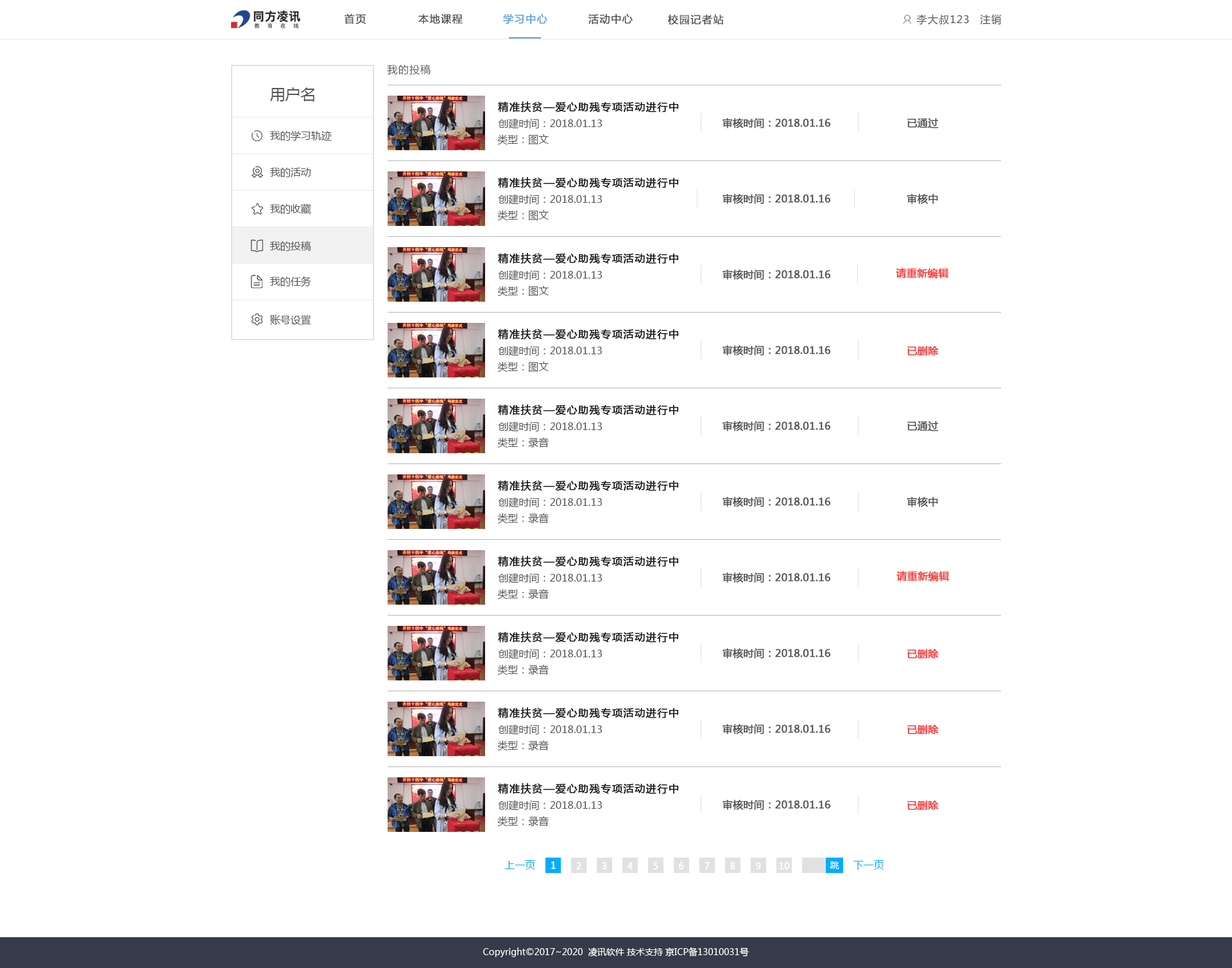
<style>
.page{position:relative;width:1232px;height:968px;background:#ffffff}
.page>*{position:absolute;margin:0}
.t1{font:10.3px "MicrosoftYaHei";letter-spacing:0.075em;color:#555555;font-weight:bold}
.t2{font:10.3px "MicrosoftYaHei";letter-spacing:0.075em;color:#54a0e6;font-weight:bold}
.t3{font:10.3px "MicrosoftYaHei";letter-spacing:0.075em;color:#555555}
.t4{font:15.4px "MicrosoftYaHei";color:#555555;text-transform:uppercase}
.t5{font:10.3px "MicrosoftYaHei";letter-spacing:0.075em;color:#181617;font-weight:bold}
.t6{font:10.3px "MicrosoftYaHei";color:#555555}
.t7{font:10.3px "MicrosoftYaHei";color:#555555;font-weight:bold}
.t8{font:10.3px "MicrosoftYaHei";color:#f73737;font-weight:bold}
.t9{font:10.3px "MicrosoftYaHei";color:#00adff}
.t10{font:9px "MicrosoftYaHei";color:#ffffff;font-weight:bold}
.t11{font:9px "MicrosoftYaHei";color:#ffffff}
</style>
<div class="page">
<p class="t1" style="left:344px;top:13px;width:22px;height:11px">首页</p>
<p class="t1" style="left:418px;top:13px;width:45px;height:11px">本地课程</p>
<p class="t2" style="left:503px;top:13px;width:44px;height:11px">学习中心</p>
<p class="t1" style="left:588px;top:13px;width:45px;height:11px">活动中心</p>
<p class="t1" style="left:668px;top:14px;width:56px;height:11px">校园记者站</p>
<p class="t3" style="left:916px;top:14px;width:53px;height:11px">李大叔123</p>
<p class="t3" style="left:980px;top:14px;width:21px;height:10px">注销</p>
<p class="t3" style="left:387px;top:64px;width:44px;height:11px">我的投稿</p>
<p class="t4" style="left:270px;top:87px;width:44px;height:14px">用户名</p>
<p class="t5" style="left:498px;top:101px;width:181px;height:11px">精准扶贫—爱心助残专项活动进行中</p>
<p class="t6" style="left:498px;top:118px;width:104px;height:11px">创建时间：2018.01.13</p>
<p class="t7" style="left:723px;top:118px;width:108px;height:10px">审核时间：2018.01.16</p>
<p class="t7" style="left:907px;top:118px;width:32px;height:10px">已通过</p>
<p class="t6" style="left:270px;top:130px;width:62px;height:11px">我的学习轨迹</p>
<p class="t6" style="left:497px;top:134px;width:52px;height:11px">类型：图文</p>
<p class="t6" style="left:270px;top:167px;width:41px;height:10px">我的活动</p>
<p class="t5" style="left:498px;top:177px;width:181px;height:11px">精准扶贫—爱心助残专项活动进行中</p>
<p class="t6" style="left:498px;top:194px;width:104px;height:11px">创建时间：2018.01.13</p>
<p class="t7" style="left:723px;top:194px;width:108px;height:10px">审核时间：2018.01.16</p>
<p class="t7" style="left:907px;top:194px;width:31px;height:10px">审核中</p>
<p class="t6" style="left:270px;top:203px;width:41px;height:11px">我的收藏</p>
<p class="t6" style="left:497px;top:210px;width:52px;height:11px">类型：图文</p>
<p class="t6" style="left:270px;top:241px;width:41px;height:10px">我的投稿</p>
<p class="t5" style="left:498px;top:253px;width:181px;height:11px">精准扶贫—爱心助残专项活动进行中</p>
<p class="t6" style="left:498px;top:270px;width:104px;height:10px">创建时间：2018.01.13</p>
<p class="t7" style="left:723px;top:270px;width:108px;height:10px">审核时间：2018.01.16</p>
<p class="t8" style="left:896px;top:268px;width:53px;height:11px">请重新编辑</p>
<p class="t6" style="left:270px;top:276px;width:41px;height:11px">我的任务</p>
<p class="t6" style="left:497px;top:286px;width:52px;height:10px">类型：图文</p>
<p class="t6" style="left:270px;top:314px;width:41px;height:11px">账号设置</p>
<p class="t5" style="left:498px;top:329px;width:181px;height:10px">精准扶贫—爱心助残专项活动进行中</p>
<p class="t6" style="left:498px;top:345px;width:104px;height:11px">创建时间：2018.01.13</p>
<p class="t7" style="left:723px;top:345px;width:108px;height:11px">审核时间：2018.01.16</p>
<p class="t8" style="left:907px;top:346px;width:32px;height:10px">已删除</p>
<p class="t6" style="left:497px;top:361px;width:52px;height:11px">类型：图文</p>
<p class="t5" style="left:498px;top:404px;width:181px;height:11px">精准扶贫—爱心助残专项活动进行中</p>
<p class="t6" style="left:498px;top:421px;width:104px;height:11px">创建时间：2018.01.13</p>
<p class="t7" style="left:723px;top:421px;width:108px;height:10px">审核时间：2018.01.16</p>
<p class="t7" style="left:907px;top:421px;width:32px;height:10px">已通过</p>
<p class="t6" style="left:497px;top:437px;width:52px;height:11px">类型：录音</p>
<p class="t5" style="left:498px;top:480px;width:181px;height:11px">精准扶贫—爱心助残专项活动进行中</p>
<p class="t6" style="left:498px;top:497px;width:104px;height:11px">创建时间：2018.01.13</p>
<p class="t7" style="left:723px;top:497px;width:108px;height:10px">审核时间：2018.01.16</p>
<p class="t7" style="left:907px;top:497px;width:31px;height:10px">审核中</p>
<p class="t6" style="left:497px;top:513px;width:52px;height:11px">类型：录音</p>
<p class="t5" style="left:498px;top:556px;width:181px;height:11px">精准扶贫—爱心助残专项活动进行中</p>
<p class="t6" style="left:498px;top:572px;width:104px;height:11px">创建时间：2018.01.13</p>
<p class="t7" style="left:723px;top:572px;width:108px;height:11px">审核时间：2018.01.16</p>
<p class="t8" style="left:897px;top:571px;width:53px;height:10px">请重新编辑</p>
<p class="t6" style="left:497px;top:588px;width:52px;height:11px">类型：录音</p>
<p class="t5" style="left:498px;top:631px;width:181px;height:11px">精准扶贫—爱心助残专项活动进行中</p>
<p class="t6" style="left:498px;top:648px;width:104px;height:11px">创建时间：2018.01.13</p>
<p class="t7" style="left:723px;top:648px;width:108px;height:10px">审核时间：2018.01.16</p>
<p class="t8" style="left:907px;top:649px;width:32px;height:9px">已删除</p>
<p class="t6" style="left:497px;top:664px;width:52px;height:11px">类型：录音</p>
<p class="t5" style="left:498px;top:707px;width:181px;height:11px">精准扶贫—爱心助残专项活动进行中</p>
<p class="t6" style="left:498px;top:724px;width:104px;height:11px">创建时间：2018.01.13</p>
<p class="t7" style="left:723px;top:724px;width:108px;height:10px">审核时间：2018.01.16</p>
<p class="t8" style="left:907px;top:725px;width:32px;height:9px">已删除</p>
<p class="t6" style="left:497px;top:740px;width:52px;height:11px">类型：录音</p>
<p class="t5" style="left:498px;top:783px;width:181px;height:11px">精准扶贫—爱心助残专项活动进行中</p>
<p class="t6" style="left:498px;top:800px;width:104px;height:11px">创建时间：2018.01.13</p>
<p class="t7" style="left:723px;top:800px;width:108px;height:10px">审核时间：2018.01.16</p>
<p class="t8" style="left:907px;top:800px;width:32px;height:10px">已删除</p>
<p class="t6" style="left:497px;top:816px;width:52px;height:11px">类型：录音</p>
<p class="t9" style="left:504px;top:860px;width:31px;height:10px">上一页</p>
<p class="t10" style="left:551px;top:861px;width:5px;height:8px">1</p>
<p class="t10" style="left:576px;top:862px;width:5px;height:8px">2</p>
<p class="t10" style="left:602px;top:862px;width:5px;height:8px">3</p>
<p class="t10" style="left:627px;top:862px;width:6px;height:8px">4</p>
<p class="t10" style="left:653px;top:862px;width:5px;height:8px">5</p>
<p class="t10" style="left:679px;top:862px;width:5px;height:8px">6</p>
<p class="t10" style="left:705px;top:862px;width:5px;height:8px">7</p>
<p class="t10" style="left:730px;top:862px;width:5px;height:8px">8</p>
<p class="t10" style="left:756px;top:862px;width:5px;height:8px">9</p>
<p class="t10" style="left:779px;top:862px;width:11px;height:8px">10</p>
<p class="t11" style="left:830px;top:861px;width:9px;height:8px">跳</p>
<p class="t9" style="left:854px;top:860px;width:30px;height:10px">下一页</p>
<p class="t11" style="left:483px;top:947px;width:266px;height:10px">Copyright©2017~2020  凌讯软件 技术支持 京ICP备13010031号</p>
</div>
